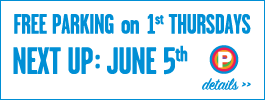
<style>
.page{position:relative;width:265px;height:100px;background:#ffffff}
.page>*{position:absolute;margin:0}
.t1{font:28px "GarageGothicBold";letter-spacing:-0.02em;color:#008fd5;text-transform:uppercase}
.t2{font:28px "GarageGothicBold";letter-spacing:-0.02em;color:#008fd5}
.t3{font:38px "GarageGothicBold";letter-spacing:-0.02em;color:#008fd5;text-transform:uppercase}
.t4{font:38px "GarageGothicBold";letter-spacing:-0.02em;color:#008fd5}
.t5{font:18px "SignPainter-HouseScript";letter-spacing:-0.02em;color:#008fd5}
</style>
<div class="page">
<p class="t1" style="left:14px;top:14px;width:237px;height:20px">FRee Parking <span class="t2">on </span>1<span class="t2">st</span> Thursdays</p>
<p class="t3" style="left:13px;top:45px;width:175px;height:30px">Next up  June 5<span class="t4">th</span></p>
<p class="t3" style="left:95px;top:54px;width:5px;height:15px">:</p>
<p class="t5" style="left:202px;top:78px;width:49px;height:12px">details &gt;&gt;</p>
</div>
